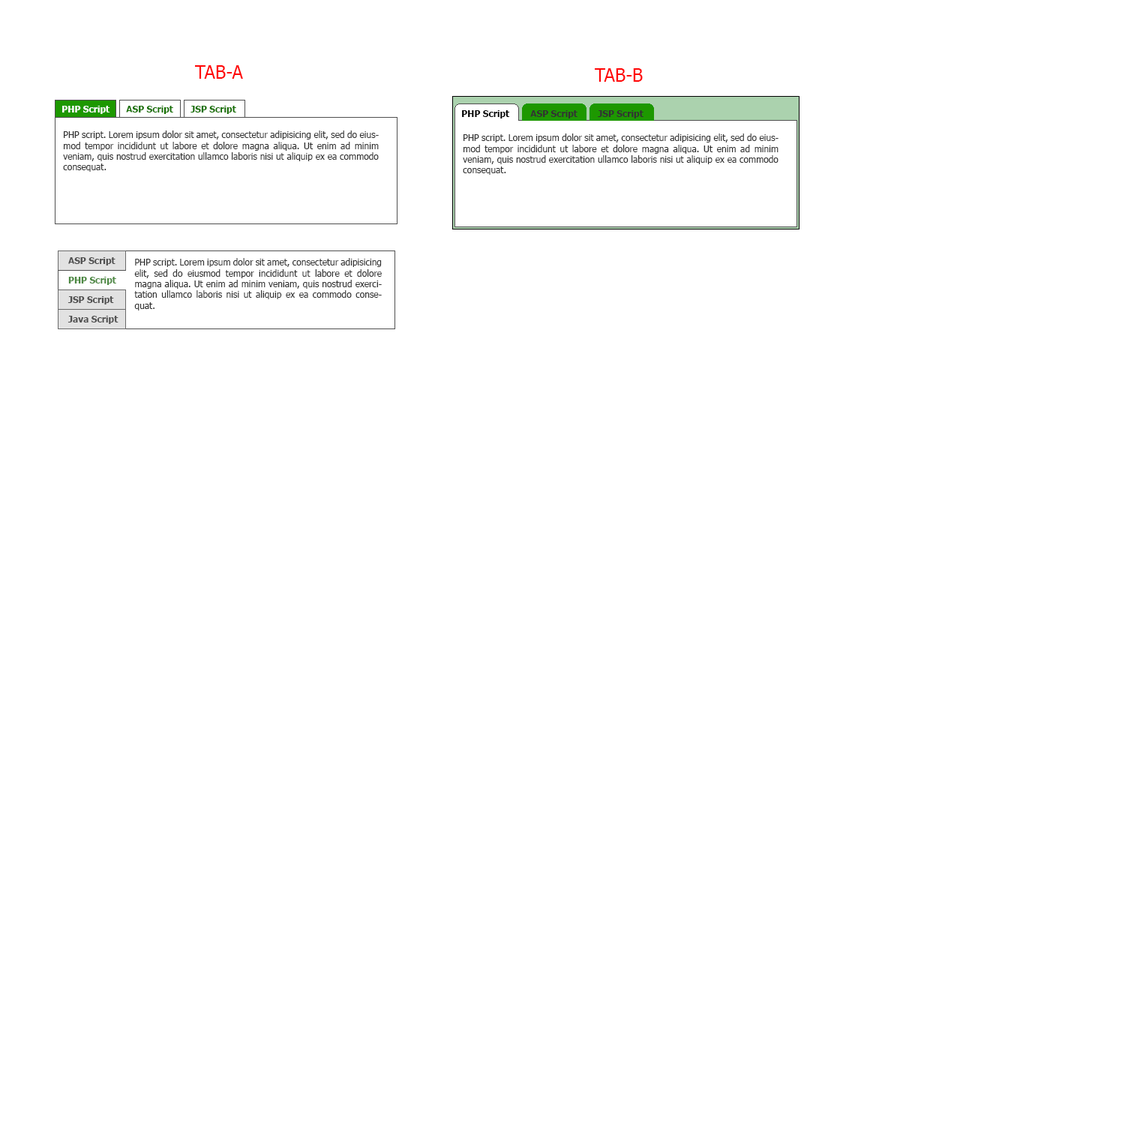
<style>
.page{position:relative;width:1125px;height:1125px;background:#ffffff}
.page>*{position:absolute;margin:0}
.t1{font:18px "Tahoma";color:#ff0404}
.t2{font:9px "Tahoma-Bold";color:#ffffff}
.t3{font:9px "Tahoma-Bold";color:#157000}
.t4{font:9px "Tahoma-Bold";color:#000000}
.t5{font:9px "Tahoma-Bold";color:#313131}
.t6{font:9px "Tahoma";color:#313131}
.t7{font:9px "Tahoma-Bold";color:#4f4f4f}
.t8{font:9px "Tahoma-Bold";color:#4c8842}
</style>
<div class="page">
<p class="t1" style="left:195px;top:65px;width:48px;height:14px">TAB-A</p>
<p class="t1" style="left:595px;top:68px;width:48px;height:14px">TAB-B</p>
<p class="t2" style="left:62px;top:106px;width:48px;height:8px">PHP Script</p>
<p class="t3" style="left:126px;top:106px;width:47px;height:8px">ASP Script</p>
<p class="t3" style="left:190px;top:106px;width:46px;height:8px">JSP Script</p>
<p class="t4" style="left:462px;top:110px;width:48px;height:8px">PHP Script</p>
<p class="t5" style="left:530px;top:110px;width:48px;height:8px">ASP Script</p>
<p class="t5" style="left:598px;top:110px;width:46px;height:8px">JSP Script</p>
<p class="t6" style="left:63px;top:130px;width:316px;height:42px;text-align:justify">PHP script. Lorem ipsum dolor sit amet, consectetur adipisicing elit, sed do eiusmod tempor incididunt ut labore et dolore magna aliqua. Ut enim ad minim veniam, quis nostrud exercitation ullamco laboris nisi ut aliquip ex ea commodo consequat.</p>
<p class="t6" style="left:463px;top:134px;width:315px;height:41px;text-align:justify">PHP script. Lorem ipsum dolor sit amet, consectetur adipisicing elit, sed do eiusmod tempor incididunt ut labore et dolore magna aliqua. Ut enim ad minim veniam, quis nostrud exercitation ullamco laboris nisi ut aliquip ex ea commodo consequat.</p>
<p class="t7" style="left:68px;top:257px;width:48px;height:9px">ASP Script</p>
<p class="t6" style="left:134px;top:258px;width:248px;height:52px;text-align:justify">PHP script. Lorem ipsum dolor sit amet, consectetur adipisicing elit, sed do eiusmod tempor incididunt ut labore et dolore magna aliqua. Ut enim ad minim veniam, quis nostrud exercitation ullamco laboris nisi ut aliquip ex ea commodo consequat.</p>
<p class="t8" style="left:68px;top:277px;width:48px;height:8px">PHP Script</p>
<p class="t7" style="left:68px;top:296px;width:46px;height:8px">JSP Script</p>
<p class="t7" style="left:68px;top:316px;width:50px;height:8px">Java Script</p>
</div>
